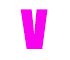
<style>
.page{position:relative;width:70px;height:60px;background:#ffffff}
.page>*{position:absolute;margin:0}
.t1{font:50px "Impact";color:#f703ee}
</style>
<div class="page">
<p class="t1" style="left:20px;top:9px;width:28px;height:40px">V</p>
</div>
